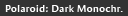
<style>
.page{position:relative;width:128px;height:16px;background:#333333}
.page>*{position:absolute;margin:0}
.t1{font:10px "AmiraParadiso";letter-spacing:0.05em;color:#ffffff}
</style>
<div class="page">
<p class="t1" style="left:5px;top:5px;width:118px;height:7px">Polaroid: Dark Monochr.</p>
</div>
